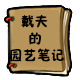
<style>
.page{position:relative;width:80px;height:80px;background:#ffffff}
.page>*{position:absolute;margin:0}
.t1{font:14px "FZSEK--GBK1-0";color:#000000}
</style>
<div class="page">
<p class="t1" style="left:10px;top:14px;width:54px;height:48px">戴夫<br>     的<br>园艺笔记</p>
</div>
